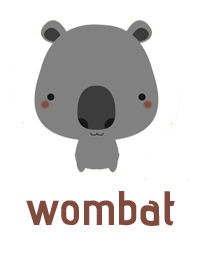
<style>
.page{position:relative;width:200px;height:253px;background:#ffffff}
.page>*{position:absolute;margin:0}
.t1{font:48px "advent-Bd3";color:#804b3c}
</style>
<div class="page">
<p class="t1" style="left:26px;top:191px;width:149px;height:35px">wombat</p>
</div>
